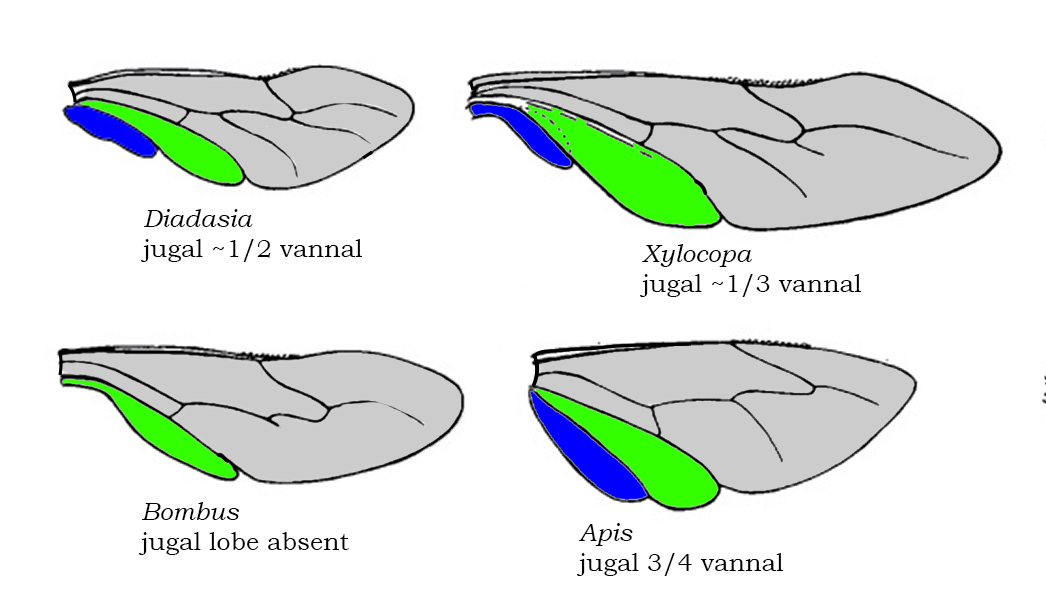
<style>
.page{position:relative;width:1046px;height:614px;background:#ffffff}
.page>*{position:absolute;margin:0}
.t1{font:25px "BookmanOldStyle";color:#000000}
.t2{font:25px "BookmanOldStyle-Italic";color:#000000}
</style>
<div class="page">
<p class="t1" style="left:140px;top:209px;width:223px;height:53px"><span class="t2">Diadasia<br></span>jugal ~1/2 vannal</p>
<p class="t1" style="left:639px;top:244px;width:223px;height:53px"><span class="t2">Xylocopa<br></span>jugal ~1/3 vannal</p>
<p class="t1" style="left:138px;top:502px;width:211px;height:53px"><span class="t2">Bombus<br></span>jugal lobe absent</p>
<p class="t1" style="left:576px;top:523px;width:208px;height:53px"><span class="t2">Apis <br></span>jugal 3/4 vannal</p>
</div>
